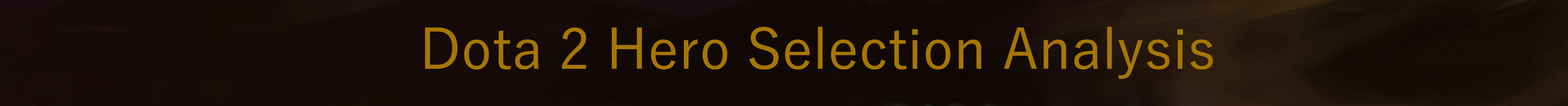
<style>
.page{position:relative;width:1568px;height:106px}
.page>*{position:absolute;margin:0}
.t1{font:56px "YuGothic-Medium";color:#a67602}
</style>
<div class="page">
<p class="t1" style="left:425px;top:27px;width:788px;height:52px">Dota 2 Hero Selection Analysis</p>
</div>
